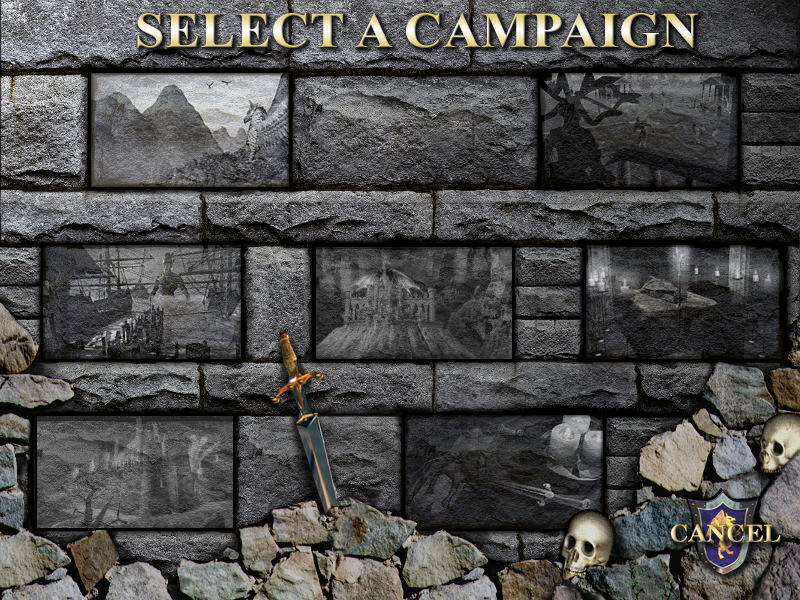
<style>
.page{position:relative;width:800px;height:600px}
.page>*{position:absolute;margin:0}
.t1{font:50px "TimesNewRomanPS-BoldMT";letter-spacing:0.01em;scale:1.05 1}
</style>
<div class="page">
<p class="t1" style="left:137px;top:13px;width:562px;height:35px">SELECT A CAMPAIGN</p>
</div>
